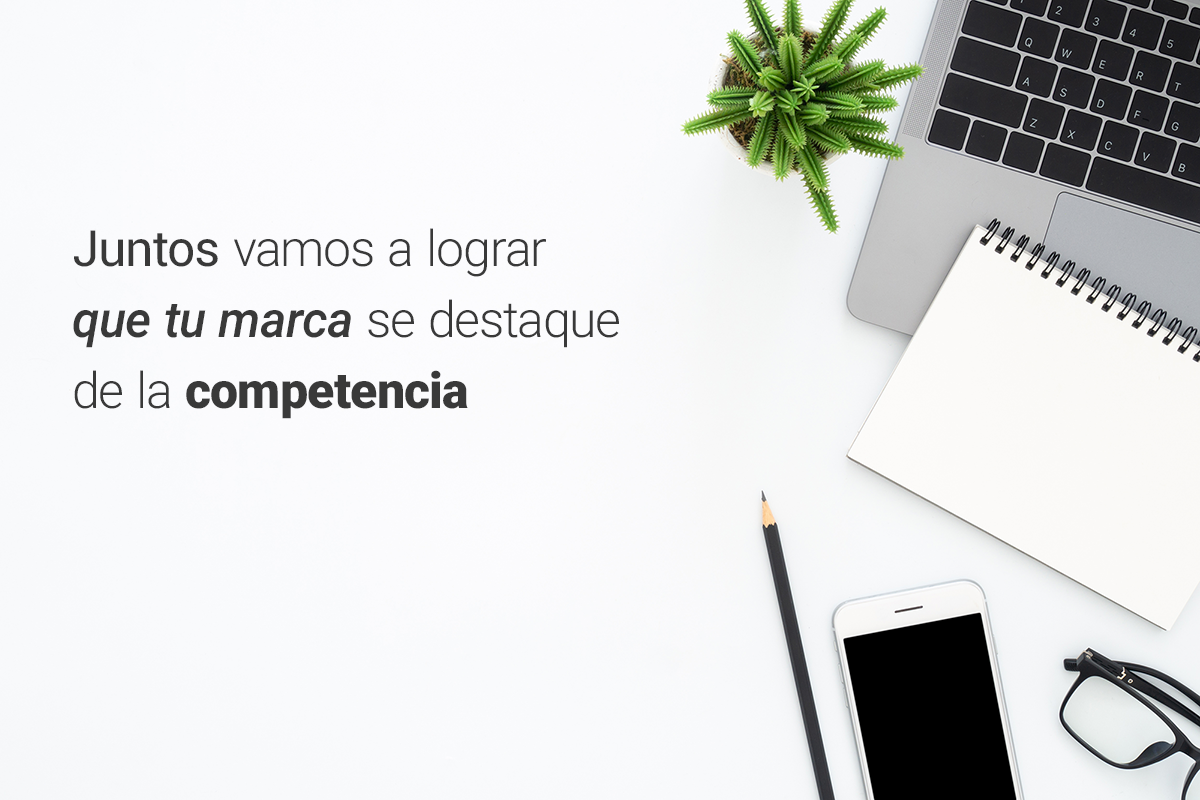
<style>
.page{position:relative;width:1200px;height:800px}
.page>*{position:absolute;margin:0}
.t1{font:50px/70.8px "Roboto-Light";color:#393939}
.t2{font:50px/70.8px "Roboto-Regular";color:#393939}
.t3{font:50px/70.8px "Roboto-MediumItalic";color:#393939}
.t4{font:50px/70.8px "Roboto-Black";color:#393939}
</style>
<div class="page">
<p class="t1" style="left:73px;top:228px;width:546px;height:191px"><span class="t2">Juntos</span> vamos a lograr<br><span class="t3">que tu marca </span>se destaque <br>de la <span class="t4">competencia</span></p>
</div>
